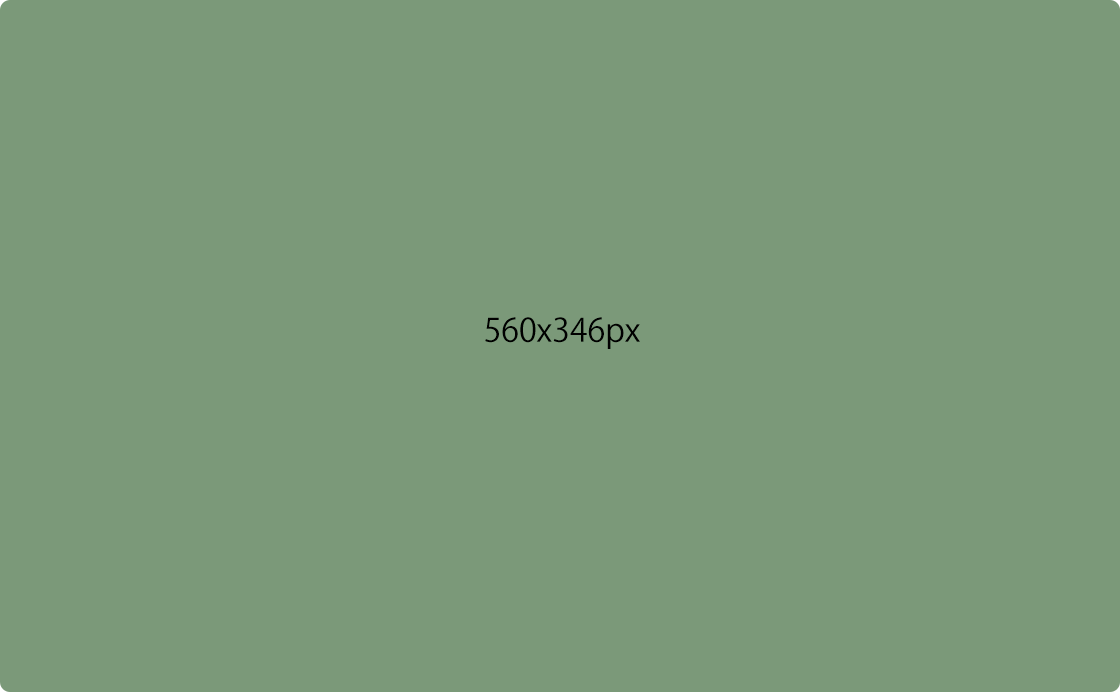
<style>
.page{position:relative;width:1120px;height:692px;background:#7b9979}
.page>*{position:absolute;margin:0}
.t1{font:32px "KozGoPr6N-Regular";color:#000000}
</style>
<div class="page">
<p class="t1" style="left:485px;top:317px;width:155px;height:32px">560x346px</p>
</div>
